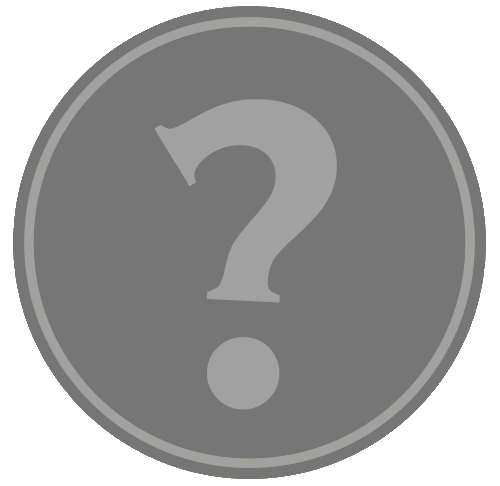
<style>
.page{position:relative;width:500px;height:486px;background:#767676}
.page>*{position:absolute;margin:0}
.t1{font:450.1px "CopperplateGothic-Bold";color:#a1a1a1}
</style>
<div class="page">
<p class="t1" style="left:154px;top:99px;width:183px;height:311px;rotate:3deg">?</p>
</div>
